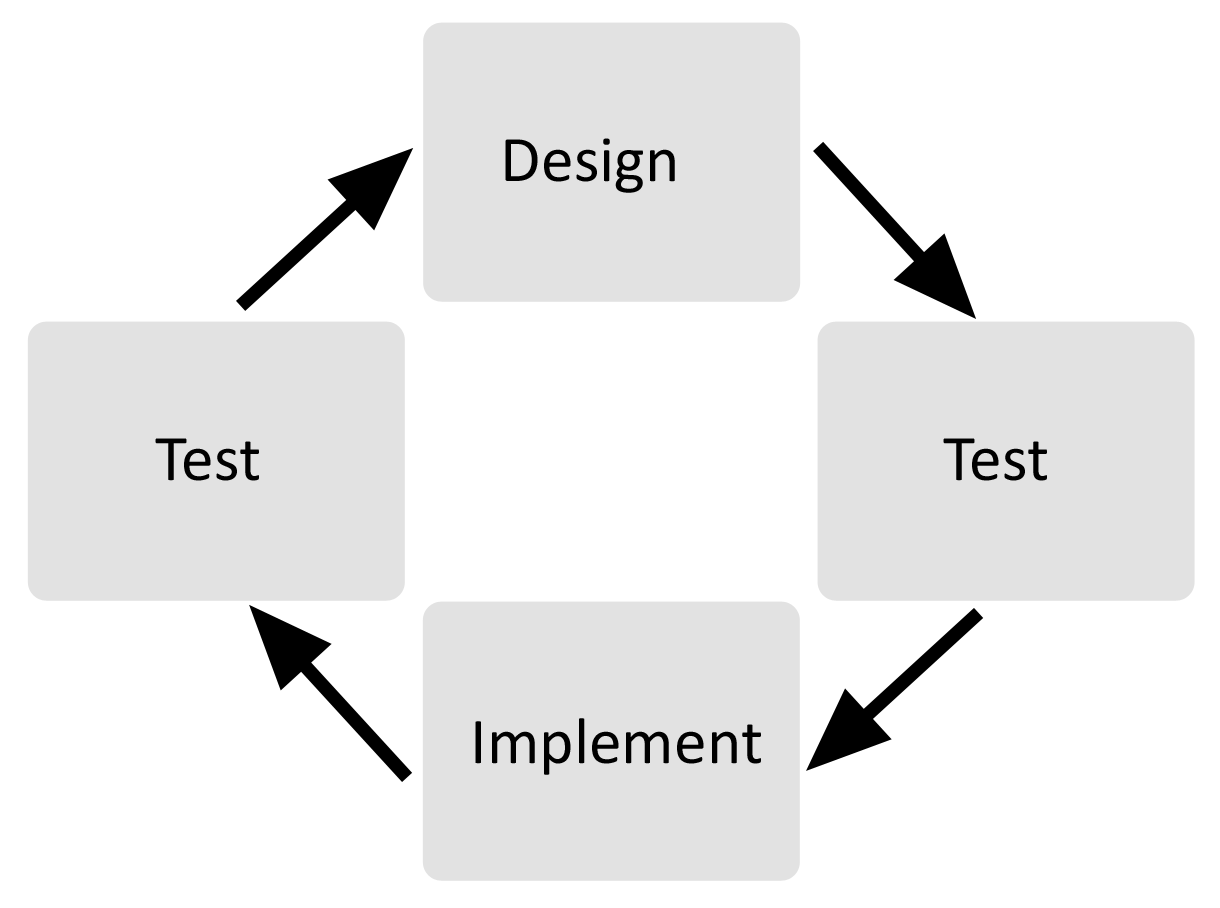
<style>
.page{position:relative;width:1220px;height:908px;background:#ffffff}
.page>*{position:absolute;margin:0}
.t1{font:65.8px "Calibri";color:#000000}
</style>
<div class="page">
<p class="t1" style="left:505px;top:138px;width:170px;height:55px">Design</p>
<p class="t1" style="left:155px;top:438px;width:104px;height:43px">Test</p>
<p class="t1" style="left:943px;top:438px;width:104px;height:43px">Test</p>
<p class="t1" style="left:475px;top:718px;width:286px;height:57px">Implement</p>
</div>
